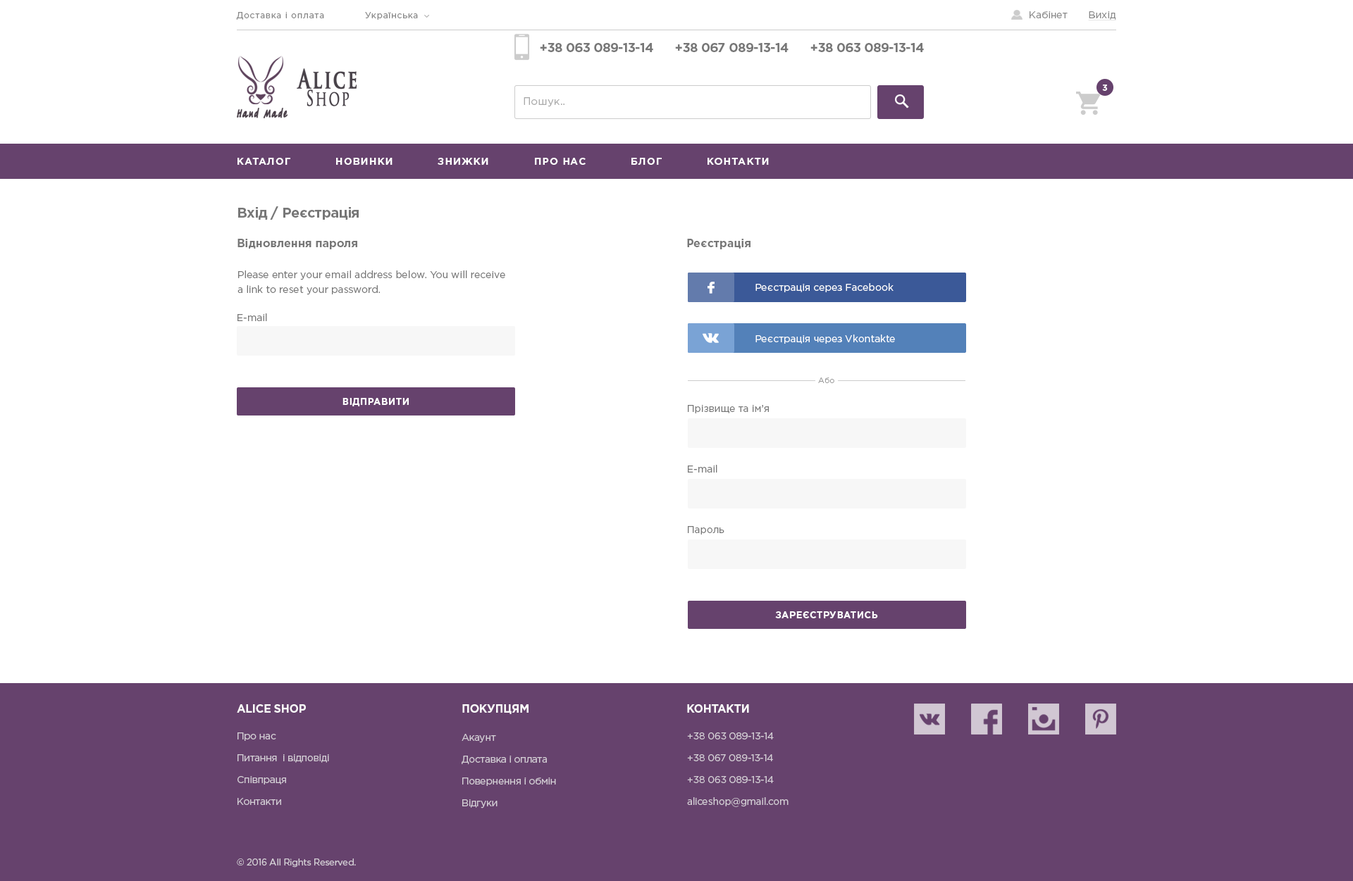
<style>
.page{position:relative;width:1353px;height:881px;background:#ffffff}
.page>*{position:absolute;margin:0}
.t1{font:8.5px "GothamPro";letter-spacing:0.075em;color:#888888}
.t2{font:9.9px "GothamPro";color:#888888}
.t3{font:9.9px "GothamPro";color:#888888;text-decoration:underline}
.t4{font:12.7px/17.6px "GothamPro-Bold";letter-spacing:-0.025em;color:#777777}
.t5{font:12.7px/17.6px "GothamPro";letter-spacing:-0.025em;color:#777777}
.t6{font:25.9px/17.3px "TrajanPro-Bold";letter-spacing:0.1em;color:#494249;font-weight:bold;scale:0.67 1}
.t7{font:20.7px/17.3px "TrajanPro-Regular";letter-spacing:0.1em;color:#494249;font-weight:bold;scale:0.67 1}
.t8{font:8.5px "GothamPro-Bold";letter-spacing:0.01em;color:#ffffff;text-transform:uppercase}
.t9{font:10.6px "GothamPro";letter-spacing:0.01em;color:#aaaaaa}
.t10{font:12px "TagirCTT";letter-spacing:0.1em;color:#463c45;font-weight:bold;scale:0.65 1}
.t11{font:9.9px "GothamPro-Bold";letter-spacing:0.075em;color:#ffffff;text-transform:uppercase}
.t12{font:14.1px "GothamPro-Bold";letter-spacing:-0.025em;color:#777777}
.t13{font:11.3px "GothamPro-Bold";color:#777777}
.t14{font:9.9px/14.8px "GothamPro";color:#777777}
.t15{font:9.9px "GothamPro";color:#ffffff}
.t16{font:9.9px "GothamPro";color:#777777}
.t17{font:7.8px "GothamPro-Light";color:#999999}
.t18{font:9.2px "GothamPro-Bold";letter-spacing:0.05em;color:#ffffff;text-transform:uppercase}
.t19{font:11.3px "GothamPro-Bold";letter-spacing:-0.025em;color:#fafafa;text-transform:uppercase}
.t20{font:9.9px/14.8px "GothamPro";letter-spacing:-0.025em;color:#d4ced6}
.t21{font:9.2px "GothamPro";letter-spacing:-0.025em;color:#d4ced6}
</style>
<div class="page">
<p class="t1" style="left:236px;top:12px;width:88px;height:8px">Доставка і оплата</p>
<p class="t1" style="left:365px;top:12px;width:53px;height:8px">Українська</p>
<p class="t2" style="left:1029px;top:11px;width:38px;height:7px">Кабінет</p>
<p class="t3" style="left:1088px;top:11px;width:28px;height:9px">Вихід</p>
<p class="t4" style="left:540px;top:43px;width:113px;height:9px">+38 063 089-13-14<span class="t5"> <br>е</span></p>
<p class="t4" style="left:675px;top:43px;width:113px;height:9px">+38 067 089-13-14<span class="t5"> <br>е</span></p>
<p class="t4" style="left:810px;top:43px;width:114px;height:9px">+38 063 089-13-14<span class="t5"> <br>е</span></p>
<p class="t6" style="left:297px;top:68px;width:60px;height:38px">Alice<br> <span class="t7">Shop</span></p>
<p class="t8" style="left:1102px;top:85px;width:6px;height:6px">3</p>
<p class="t9" style="left:524px;top:97px;width:40px;height:10px">Пошук..</p>
<p class="t10" style="left:237px;top:108px;width:50px;height:10px">Hand Made</p>
<p class="t11" style="left:237px;top:158px;width:53px;height:7px">каталог</p>
<p class="t11" style="left:336px;top:158px;width:56px;height:7px">Новинки</p>
<p class="t11" style="left:438px;top:158px;width:50px;height:7px">Знижки</p>
<p class="t11" style="left:535px;top:158px;width:51px;height:7px">Про нас</p>
<p class="t11" style="left:631px;top:158px;width:31px;height:7px">Блог</p>
<p class="t11" style="left:707px;top:158px;width:62px;height:7px">Контакти</p>
<p class="t12" style="left:238px;top:206px;width:121px;height:14px">Вхід / Реєстрація</p>
<p class="t13" style="left:237px;top:239px;width:120px;height:10px">Відновлення пароля</p>
<p class="t13" style="left:687px;top:239px;width:63px;height:10px">Реєстрація</p>
<p class="t14" style="left:237px;top:271px;width:268px;height:24px">Please enter your email address below. You will receive <br>a link to reset your password.</p>
<p class="t15" style="left:755px;top:283px;width:138px;height:9px">Реєстрація серез Facebook</p>
<p class="t16" style="left:237px;top:314px;width:30px;height:7px">E-mail</p>
<p class="t15" style="left:755px;top:335px;width:140px;height:9px">Реєстрація через Vkontakte</p>
<p class="t17" style="left:818px;top:378px;width:16px;height:5px">Або</p>
<p class="t18" style="left:342px;top:398px;width:67px;height:9px">Відправити</p>
<p class="t16" style="left:688px;top:405px;width:81px;height:9px">Прізвище та ім’я</p>
<p class="t16" style="left:688px;top:465px;width:29px;height:8px">E-mail</p>
<p class="t16" style="left:688px;top:526px;width:36px;height:9px">Пароль</p>
<p class="t18" style="left:775px;top:612px;width:103px;height:7px">Зареєструватись</p>
<p class="t19" style="left:237px;top:705px;width:69px;height:8px">Alice Shop</p>
<p class="t19" style="left:462px;top:705px;width:66px;height:9px">Покупцям</p>
<p class="t19" style="left:687px;top:705px;width:62px;height:8px">Контакти</p>
<p class="t20" style="left:237px;top:733px;width:92px;height:72px">Про нас<br>Питання  і відповіді<br>Співпраця<br>Контакти</p>
<p class="t20" style="left:462px;top:734px;width:94px;height:75px">Акаунт<br>Доставка і оплата<br>Повернення і обмін<br>Відгуки</p>
<p class="t20" style="left:687px;top:733px;width:101px;height:74px">+38 063 089-13-14 <br>+38 067 089-13-14 <br>+38 063 089-13-14 <br>aliceshop@gmail.com</p>
<p class="t21" style="left:237px;top:859px;width:119px;height:9px">© 2016 All Rights Reserved.</p>
</div>
